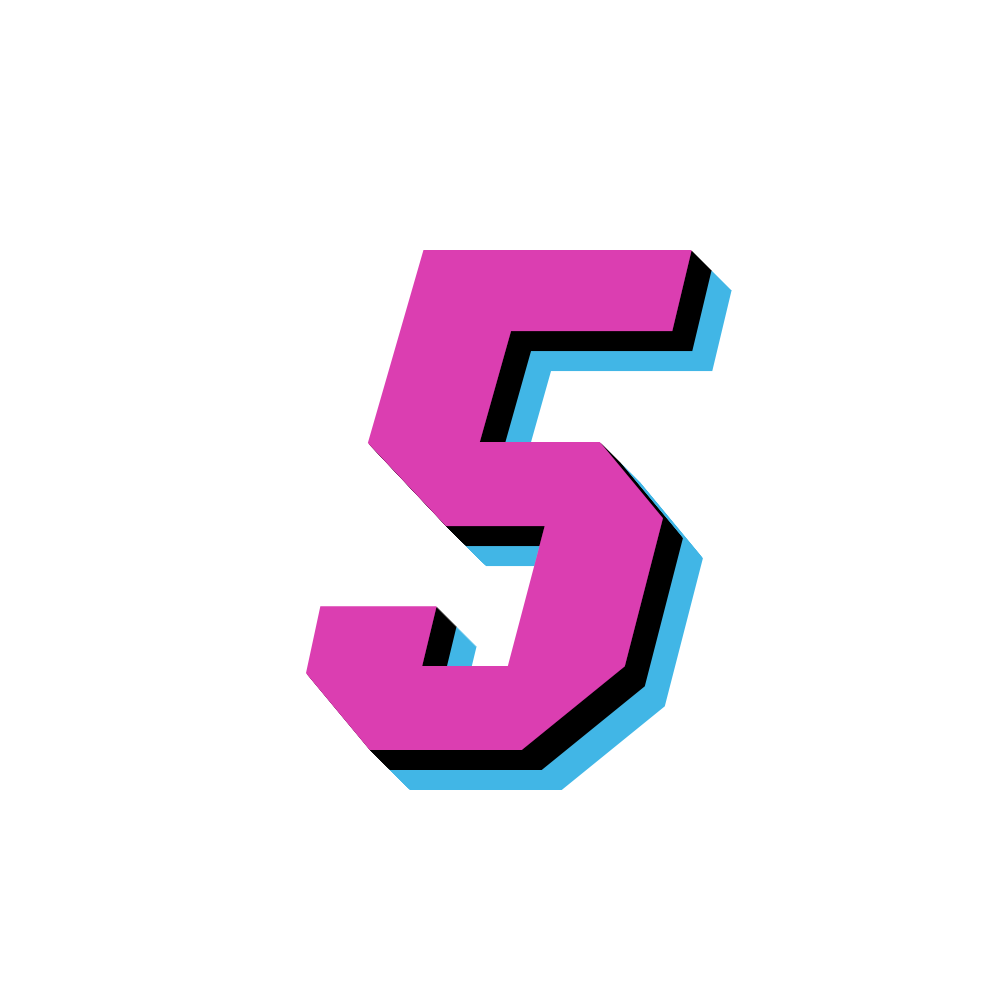
<style>
.page{position:relative;width:1000px;height:1000px;background:#ffffff}
.page>*{position:absolute;margin:0}
.t1{font:625px "NBAHeat";color:#db3eb1}
</style>
<div class="page">
<p class="t1" style="left:306px;top:250px;width:386px;height:500px">5</p>
</div>
